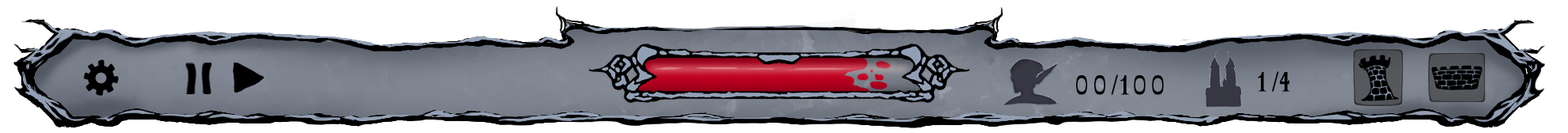
<style>
.page{position:relative;width:1568px;height:133px;background:#ffffff}
.page>*{position:absolute;margin:0}
.t1{font:26.3px "Sprat-CondesedRegular";letter-spacing:0.16em;color:#000000;font-weight:bold;scale:0.9 1}
.t2{font:26.3px "Sprat-CondesedRegular";letter-spacing:0.22em;color:#000000;font-weight:bold;scale:0.9 1}
</style>
<div class="page">
<p class="t1" style="left:1076px;top:74px;width:88px;height:21px">00/100</p>
<p class="t2" style="left:1258px;top:71px;width:32px;height:21px">1/4</p>
</div>
